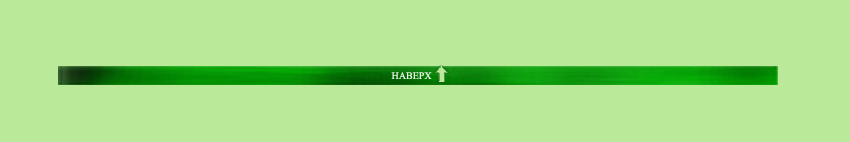
<style>
.page{position:relative;width:850px;height:142px;background:#bae99a}
.page>*{position:absolute;margin:0}
.t1{font:10px "TimesNewRomanPSMT";color:#eff6e9}
</style>
<div class="page">
<p class="t1" style="left:391px;top:72px;width:41px;height:7px">НАВЕРХ</p>
</div>
